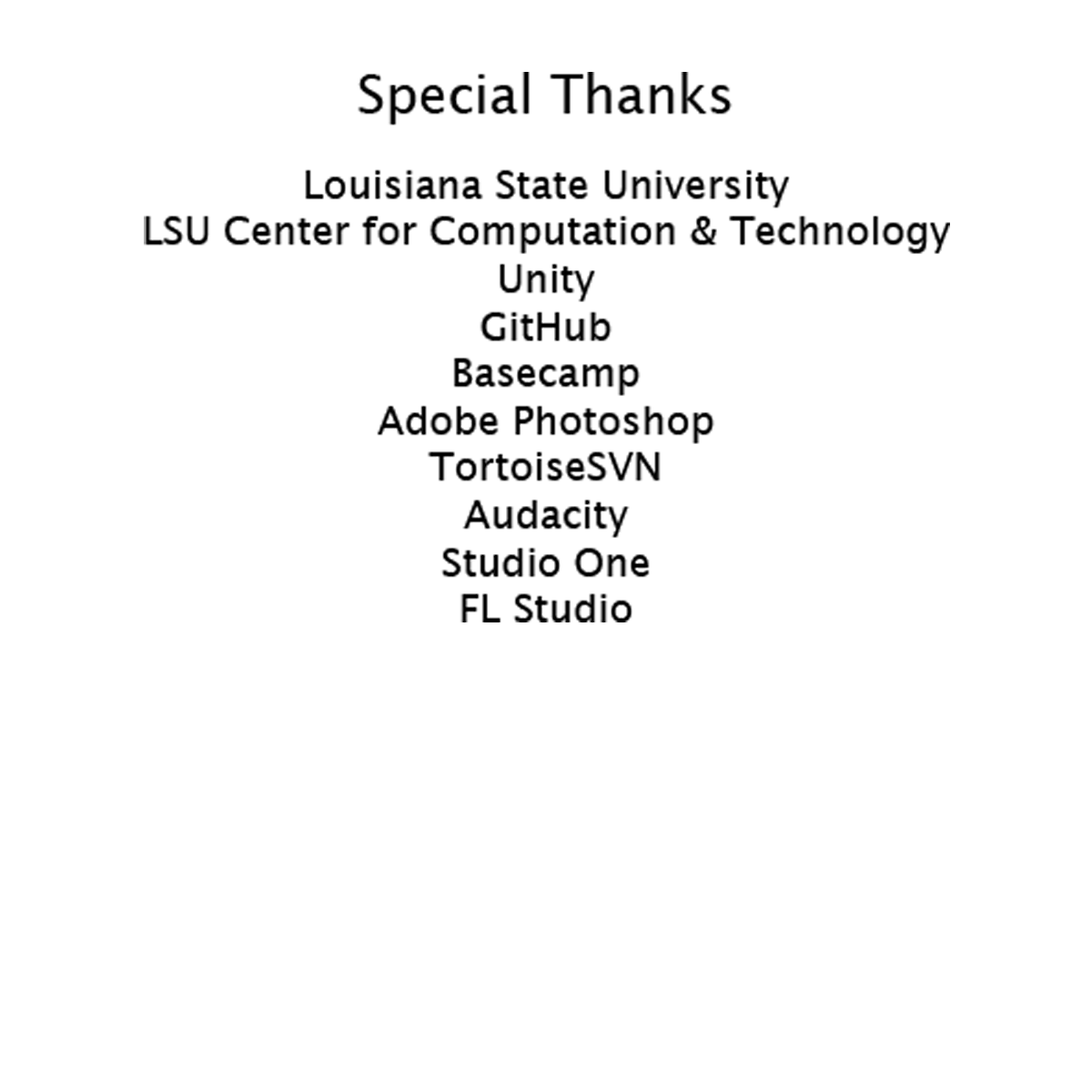
<style>
.page{position:relative;width:1092px;height:1092px;background:#ffffff}
.page>*{position:absolute;margin:0}
.t1{font:39.3px "LucidaGrande";color:#000000}
.t2{font:52.4px "LucidaGrande";color:#000000}
</style>
<div class="page">
<p class="t1" style="left:144px;top:72px;width:806px;height:550px;text-align:center"><span class="t2"><br>Special Thanks<br><br></span>Louisiana State University<br>LSU Center for Computation &amp; Technology<br>Unity<br>GitHub<br>Basecamp<br>Adobe Photoshop<br>TortoiseSVN<br>Audacity<br>Studio One<br>FL Studio</p>
</div>
